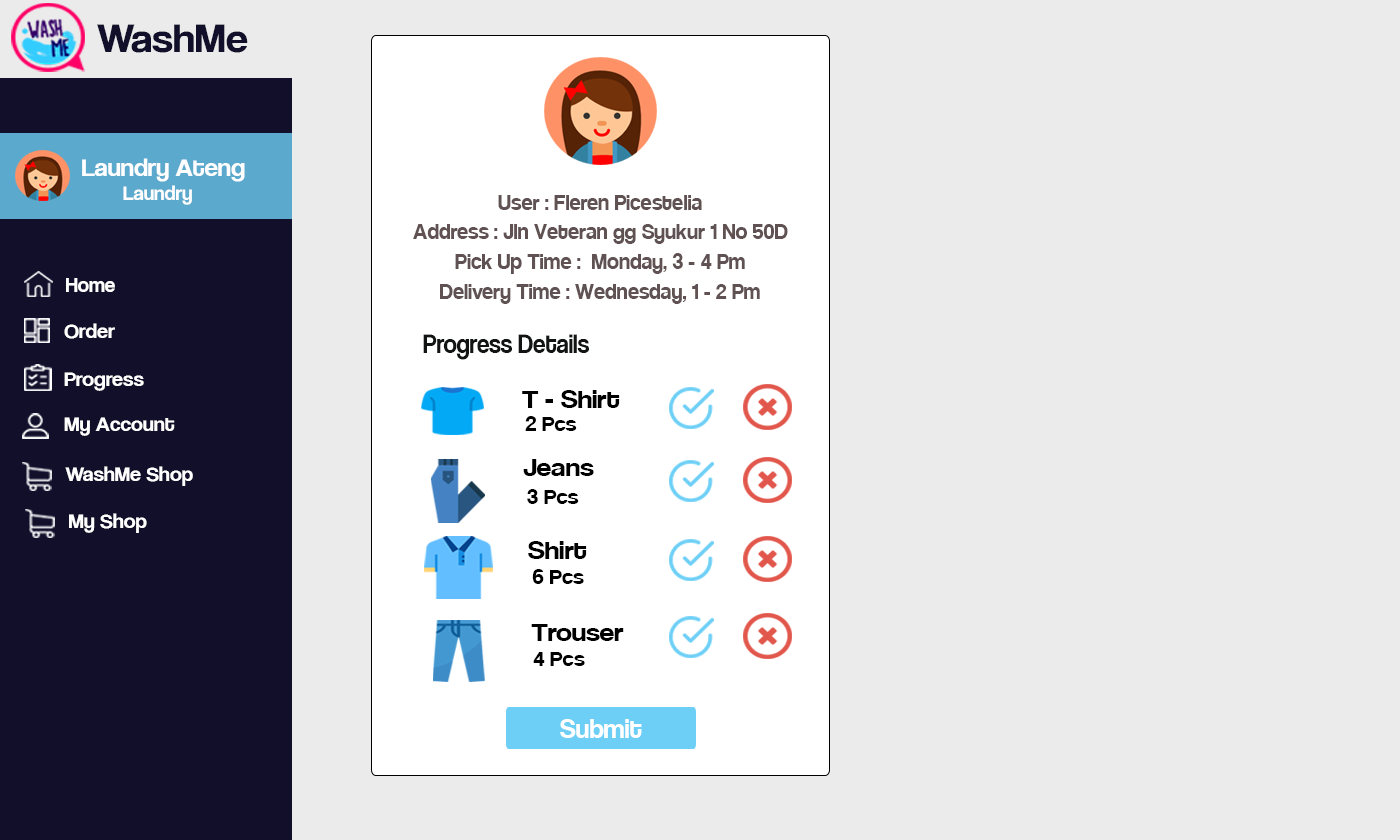
<style>
.page{position:relative;width:1400px;height:840px;background:#ebebeb}
.page>*{position:absolute;margin:0}
.t1{font:42.1px "CoolveticaRg-Regular";color:#120f2b;scale:1.05 1}
.t2{font:25.2px "CoolveticaRg-Regular";color:#ffffff;scale:1.05 1}
.t3{font:20px "CoolveticaRg-Regular";color:#ffffff;scale:1.05 1}
.t4{font:24px "Coolvetica-Regular";color:#605252}
.t5{font:21px "CoolveticaRg-Regular";color:#ffffff}
.t6{font:21px "CoolveticaRg-Regular";color:#ffffff;scale:1.05 1}
.t7{font:27px "CoolveticaRg-Regular";color:#121313;scale:0.91 1}
.t8{font:28.3px "Coolvetica-Regular";color:#000000;scale:1.12 1}
.t9{font:22.6px "Coolvetica-Regular";color:#000000;scale:1.12 1}
.t10{font:30px "Coolvetica-Regular";color:#ffffff}
</style>
<div class="page">
<p class="t1" style="left:97px;top:24px;width:151px;height:29px">WashMe</p>
<p class="t2" style="left:82px;top:158px;width:163px;height:47px">Laundry Ateng<br><span class="t3">        Laundry</span></p>
<p class="t4" style="left:498px;top:195px;width:204px;height:15px">User : Fleren Picestelia</p>
<p class="t4" style="left:413px;top:224px;width:375px;height:20px">Address : Jln Veteran gg Syukur 1 No 50D</p>
<p class="t4" style="left:455px;top:253px;width:290px;height:21px">Pick Up Time :  Monday, 3 - 4 Pm</p>
<p class="t5" style="left:66px;top:278px;width:49px;height:14px">Home</p>
<p class="t4" style="left:440px;top:284px;width:320px;height:20px">Delivery Time : Wednesday, 1 - 2 Pm</p>
<p class="t6" style="left:64px;top:323px;width:51px;height:16px">Order</p>
<p class="t7" style="left:423px;top:334px;width:166px;height:26px">Progress Details</p>
<p class="t6" style="left:64px;top:372px;width:80px;height:19px">Progress</p>
<p class="t8" style="left:522px;top:390px;width:98px;height:18px">T - Shirt</p>
<p class="t6" style="left:64px;top:417px;width:111px;height:19px">My Account</p>
<p class="t9" style="left:525px;top:416px;width:52px;height:15px">2 Pcs</p>
<p class="t8" style="left:523px;top:459px;width:71px;height:17px">Jeans</p>
<p class="t6" style="left:65px;top:466px;width:128px;height:20px">WashMe Shop</p>
<p class="t9" style="left:527px;top:489px;width:52px;height:15px">3 Pcs</p>
<p class="t6" style="left:69px;top:513px;width:78px;height:20px">My Shop</p>
<p class="t8" style="left:528px;top:541px;width:59px;height:18px">Shirt</p>
<p class="t9" style="left:532px;top:569px;width:52px;height:15px">6 Pcs</p>
<p class="t8" style="left:531px;top:624px;width:93px;height:17px">Trouser</p>
<p class="t9" style="left:533px;top:652px;width:52px;height:14px">4 Pcs</p>
<p class="t10" style="left:560px;top:719px;width:82px;height:19px">Submit</p>
</div>
